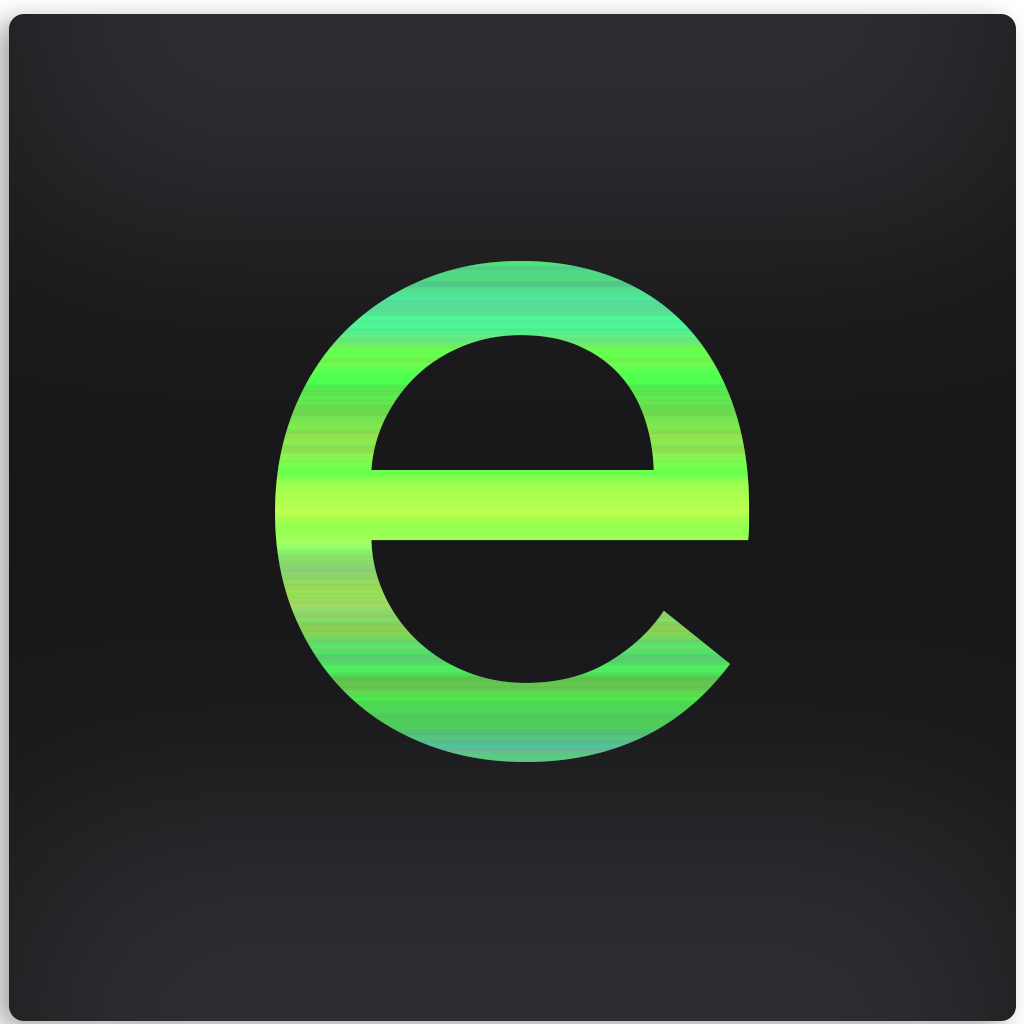
<style>
.page{position:relative;width:1024px;height:1024px}
.page>*{position:absolute;margin:0}
.t1{font:1001.8px "AvenirNext-Medium"}
</style>
<div class="page">
<p class="t1" style="left:275px;top:261px;width:475px;height:501px">e</p>
</div>
